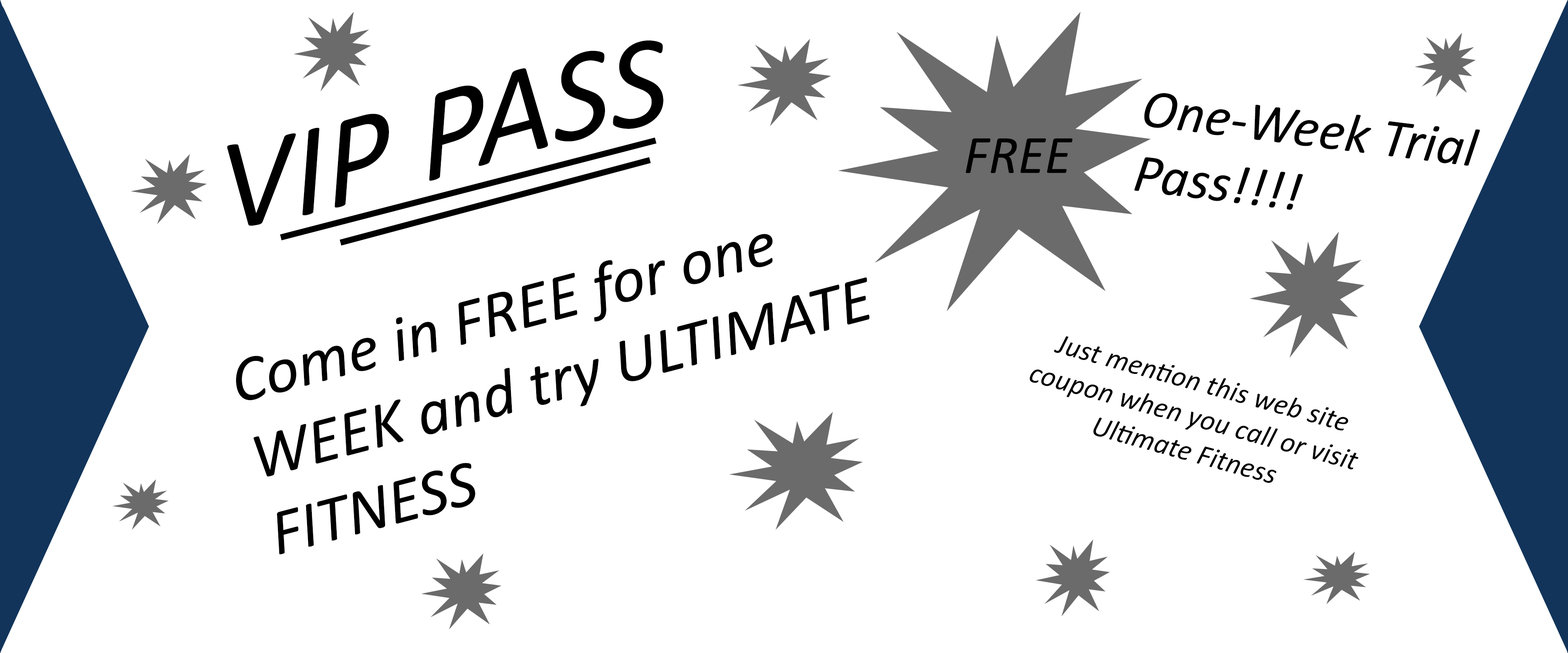
<style>
.page{position:relative;width:1568px;height:653px;background:#ffffff}
.page>*{position:absolute;margin:0}
.t1{font:130.7px "Calibri-Italic";color:#000000}
.t2{font:54.4px "Calibri-Italic";color:#000000}
.t3{font:65.3px "Calibri-Italic";color:#000000}
.t4{font:29px "Calibri-Italic";color:#000000}
</style>
<div class="page">
<p class="t1" style="left:227px;top:41px;width:436px;height:185px;rotate:-7deg">VIP PASS</p>
<p class="t2" style="left:1134px;top:93px;width:346px;height:117px;rotate:7deg">One-Week Trial<br>Pass!!!!</p>
<p class="t2" style="left:966px;top:139px;width:107px;height:34px">FREE</p>
<p class="t3" style="left:236px;top:234px;width:633px;height:321px;rotate:-15deg">Come in FREE for one<br>WEEK and try ULTIMATE<br>FITNESS</p>
<p class="t4" style="left:1030px;top:336px;width:328px;height:147px;text-align:center;rotate:15deg">Just mention this web site<br>coupon when you call or visit<br>Ultimate Fitness</p>
</div>
